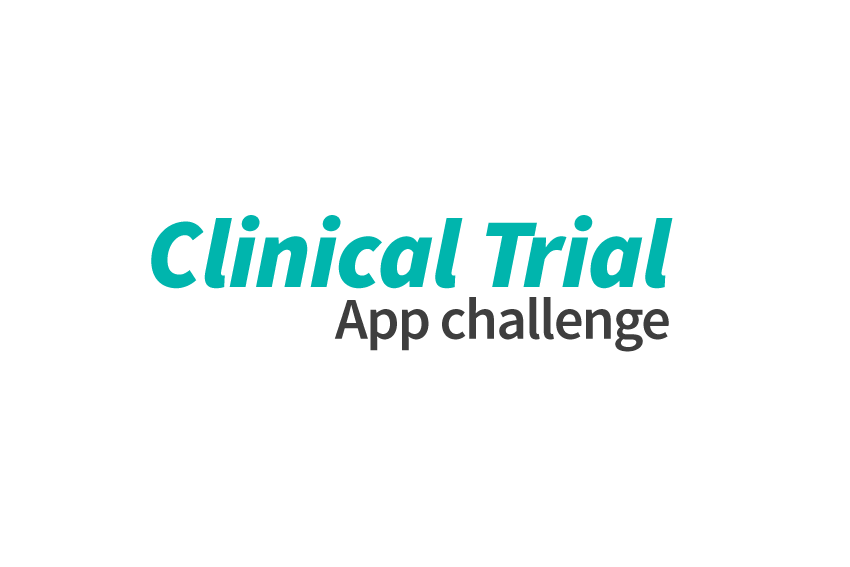
<style>
.page{position:relative;width:850px;height:567px;background:#ffffff}
.page>*{position:absolute;margin:0}
.t1{font:99px "SourceSansPro-BlackIt";letter-spacing:-0.01em;color:#00b5ad}
.t2{font:59px "SourceSansPro-Semibold";letter-spacing:-0.03em;color:#3e3e3e}
</style>
<div class="page">
<p class="t1" style="left:151px;top:215px;width:522px;height:74px">Clinical Trial</p>
<p class="t2" style="left:334px;top:297px;width:335px;height:55px">App challenge</p>
</div>
